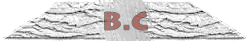
<style>
.page{position:relative;width:250px;height:41px;background:#ffffff}
.page>*{position:absolute;margin:0}
.t1{font:30px "LithosPro-Black";color:#ad6f69}
</style>
<div class="page">
<p class="t1" style="left:104px;top:11px;width:44px;height:20px">b.c</p>
</div>
